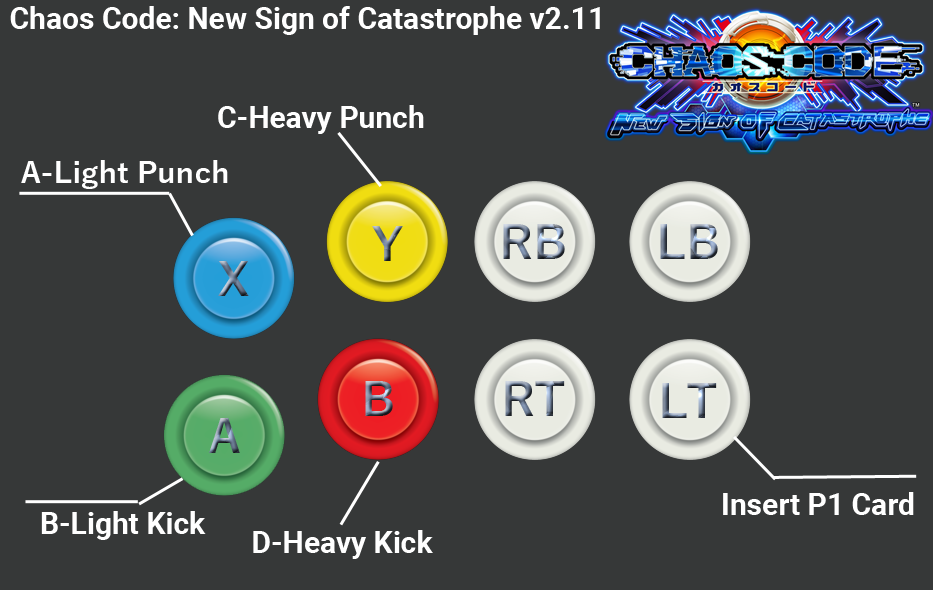
<style>
.page{position:relative;width:933px;height:590px;background:#363838}
.page>*{position:absolute;margin:0}
.t1{font:30px "Roboto-Bold";color:#ffffff}
.t2{font:30px "YuGothic-Bold";color:#ffffff}
</style>
<div class="page">
<p class="t1" style="left:10px;top:6px;width:590px;height:29px">Chaos Code: New Sign of Catastrophe v2.11</p>
<p class="t1" style="left:218px;top:105px;width:206px;height:29px">C-Heavy Punch</p>
<p class="t2" style="left:21px;top:160px;width:207px;height:29px">A-Light Punch</p>
<p class="t1" style="left:723px;top:492px;width:191px;height:23px">Insert P1 Card</p>
<p class="t1" style="left:41px;top:511px;width:165px;height:29px">B-Light Kick</p>
<p class="t1" style="left:253px;top:530px;width:180px;height:29px">D-Heavy Kick</p>
</div>
